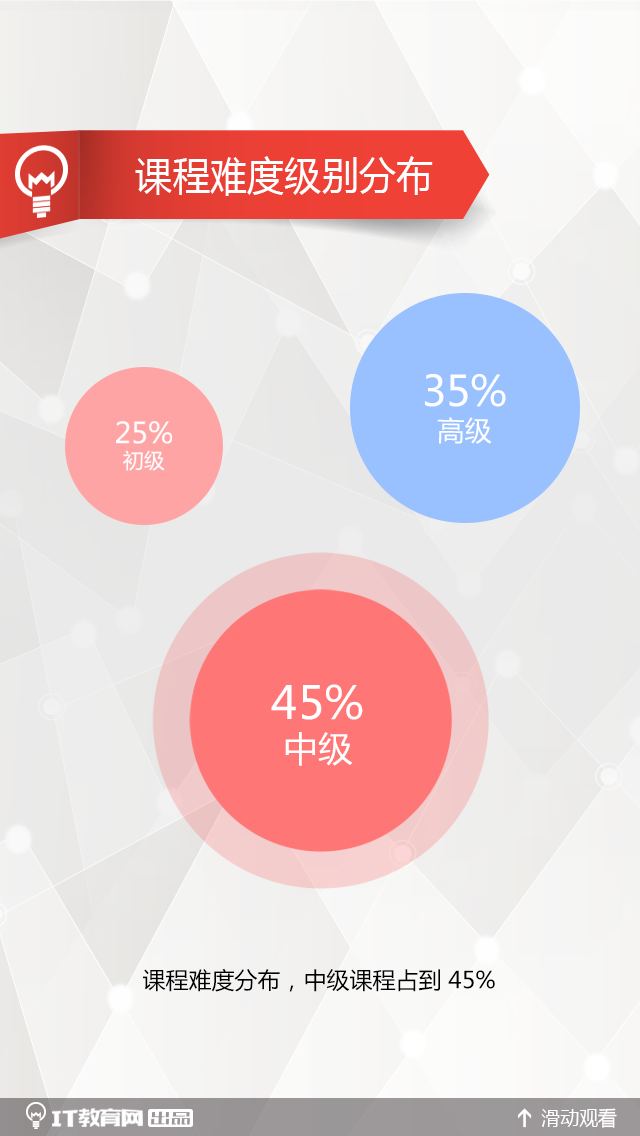
<style>
.page{position:relative;width:640px;height:1136px}
.page>*{position:absolute;margin:0}
.t1{font:40px "MicrosoftYaHei";color:#ffffff;scale:0.93 1}
.t2{font:41.7px "MicrosoftYaHei";color:#ffffff}
.t3{font:27.3px "MicrosoftYaHei";color:#ffffff}
.t4{font:44.9px "MicrosoftYaHei";color:#ffffff}
.t5{font:34.7px "MicrosoftYaHei";color:#ffffff}
.t6{font:23px "MicrosoftYaHei";color:#000000}
.t7{font:20.2px "MicrosoftYaHei";color:#ffffff;scale:0.94 1}
</style>
<div class="page">
<p class="t1" style="left:135px;top:156px;width:298px;height:40px">课程难度级别分布</p>
<p class="t2" style="left:425px;top:374px;width:81px;height:33px">35%</p>
<p class="t3" style="left:437px;top:417px;width:55px;height:27px">高级</p>
<p class="t4" style="left:271px;top:684px;width:92px;height:36px">45%</p>
<p class="t5" style="left:285px;top:732px;width:68px;height:34px">中级</p>
<p class="t6" style="left:143px;top:968px;width:352px;height:24px">课程难度分布，中级课程占到 45%</p>
<p class="t7" style="left:541px;top:1108px;width:76px;height:20px">滑动观看</p>
</div>
